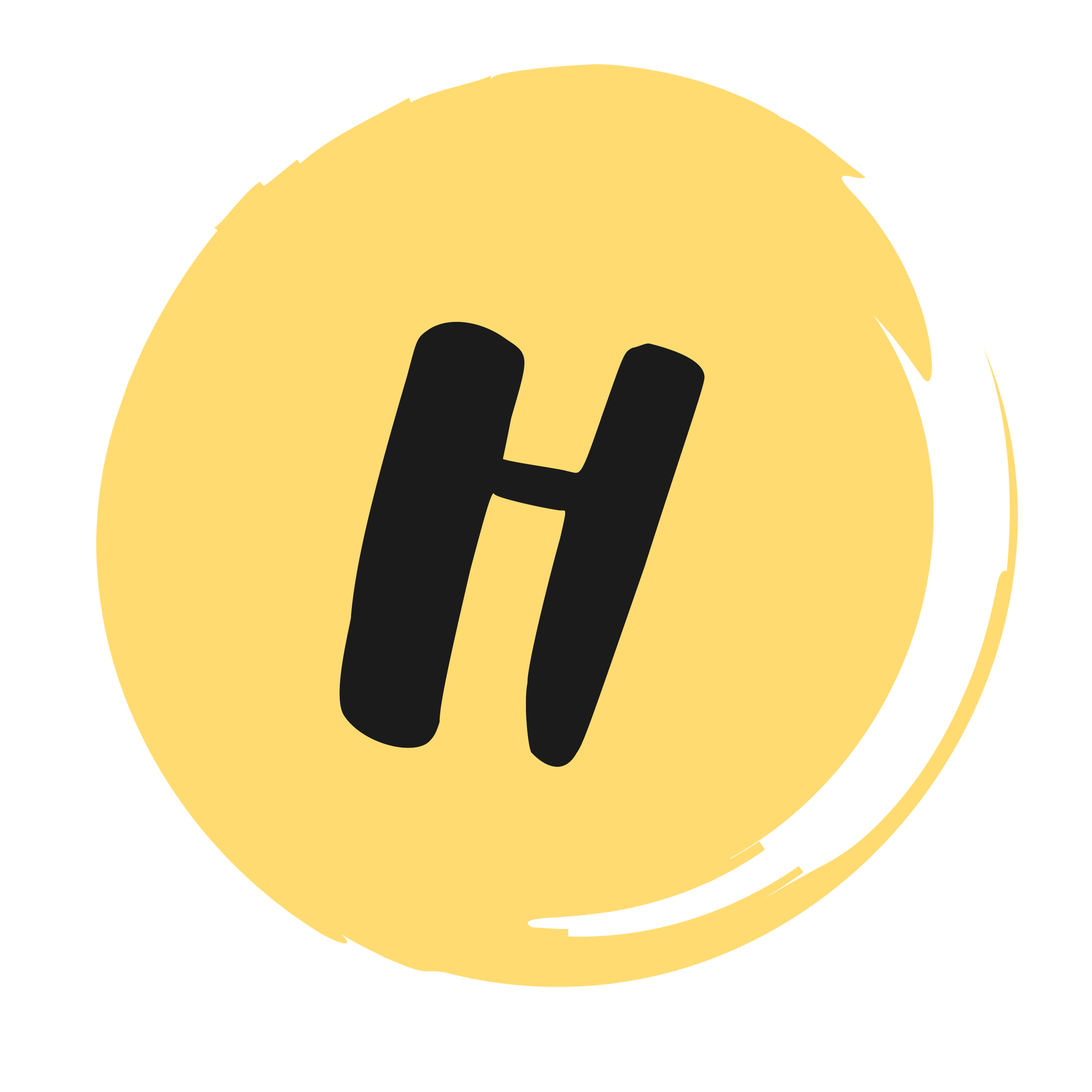
<style>
.page{position:relative;width:1092px;height:1092px;background:#ffffff}
.page>*{position:absolute;margin:0}
.t1{font:619px "Ludicrous-Regular";color:#1b1b1b;font-weight:bold}
</style>
<div class="page">
<p class="t1" style="left:339px;top:322px;width:366px;height:445px;rotate:14deg">H</p>
</div>
